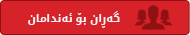
<style>
.page{position:relative;width:190px;height:35px;background:#d72229}
.page>*{position:absolute;margin:0}
.t1{font:11px "DroidArabicKufi-Bold";color:#f1f2f2}
</style>
<div class="page">
<p class="t1" style="left:28px;top:11px;width:92px;height:17px">گەڕان بۆ ئەندامان</p>
</div>
